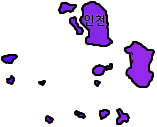
<style>
.page{position:relative;width:157px;height:127px;background:#ffffff}
.page>*{position:absolute;margin:0}
.t1{font:12px "HancomGothicBold";color:#000000}
</style>
<div class="page">
<p class="t1" style="left:84px;top:15px;width:21px;height:11px">인천</p>
</div>
